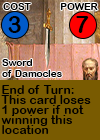
<style>
.page{position:relative;width:100px;height:140px;background:#795b01}
.page>*{position:absolute;margin:0}
.t1{font:9.7px "ArialRoundedMTBold";letter-spacing:0.01em;color:#000000}
.t2{font:24px "ArialRoundedMTBold";letter-spacing:0.01em;color:#000000}
.t3{font:24px "ArialRoundedMTBold";letter-spacing:-0.1em;color:#000000}
.t4{font:12px/10px "ArialRoundedMTBold";letter-spacing:0.01em;color:#000000}
</style>
<div class="page">
<p class="t1" style="left:3px;top:3px;width:28px;height:7px">COST</p>
<p class="t1" style="left:60px;top:3px;width:38px;height:7px">POWER</p>
<p class="t2" style="left:8px;top:16px;width:13px;height:17px">3</p>
<p class="t3" style="left:76px;top:16px;width:13px;height:17px">7</p>
<p class="t1" style="left:2px;top:59px;width:60px;height:18px">Sword<br>of Damocles</p>
<p class="t4" style="left:1px;top:85px;width:90px;height:49px">End of Turn:<br>This card loses<br>1 power if not<br>winning this<br>location</p>
</div>
